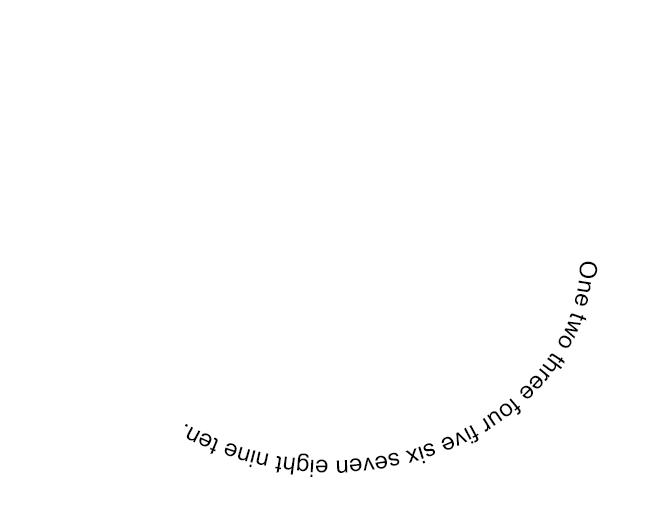
<style>
.page{position:relative;width:660px;height:520px;background:#ffffff}
.page>*{position:absolute;margin:0}
.t1{font:24px "ArialMT";color:#000000}
</style>
<div class="page">
<p class="t1" style="left:184px;top:261px;width:414px;height:216px">One two three four five six seven eight nine ten.</p>
</div>
